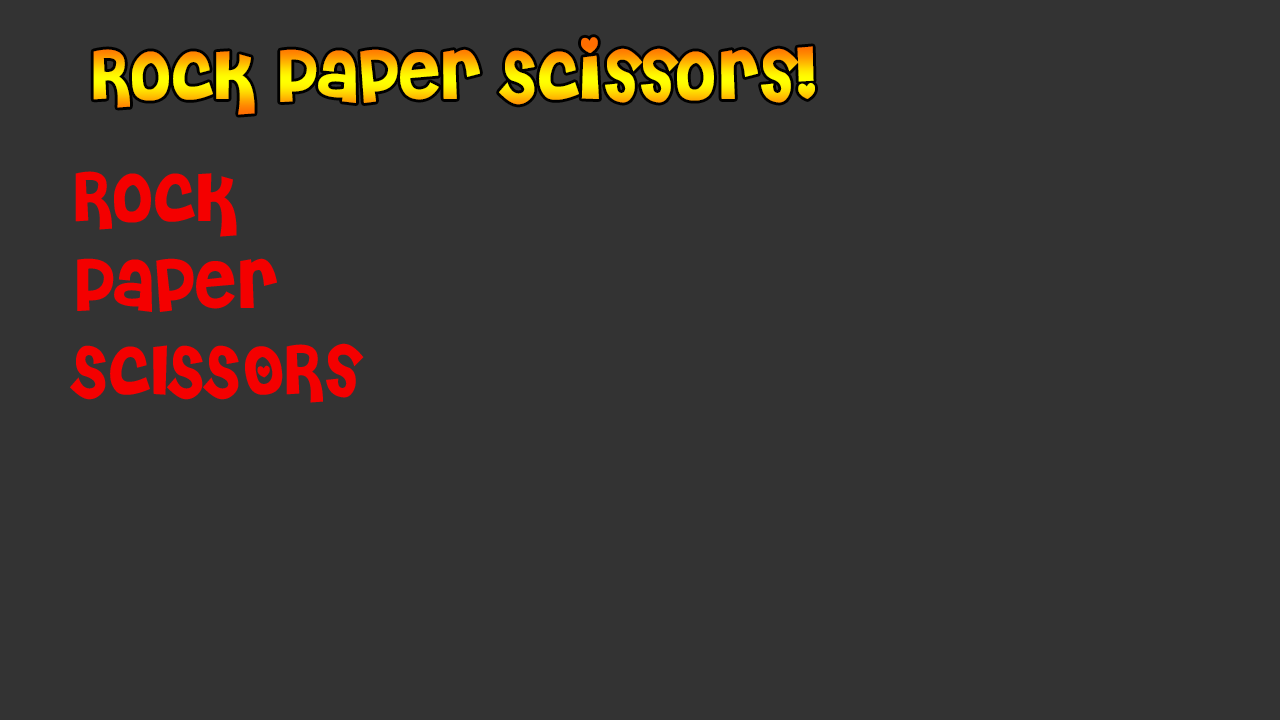
<style>
.page{position:relative;width:1280px;height:720px;background:#333333}
.page>*{position:absolute;margin:0}
.t1{font:72px "Cheri"}
.t2{font:72px "Cheri";color:#f40000}
</style>
<div class="page">
<p class="t1" style="left:93px;top:37px;width:722px;height:78px">Rock Paper Scissors!</p>
<p class="t2" style="left:70px;top:171px;width:294px;height:232px">Rock<br>Paper<br>ScISSORs</p>
</div>
